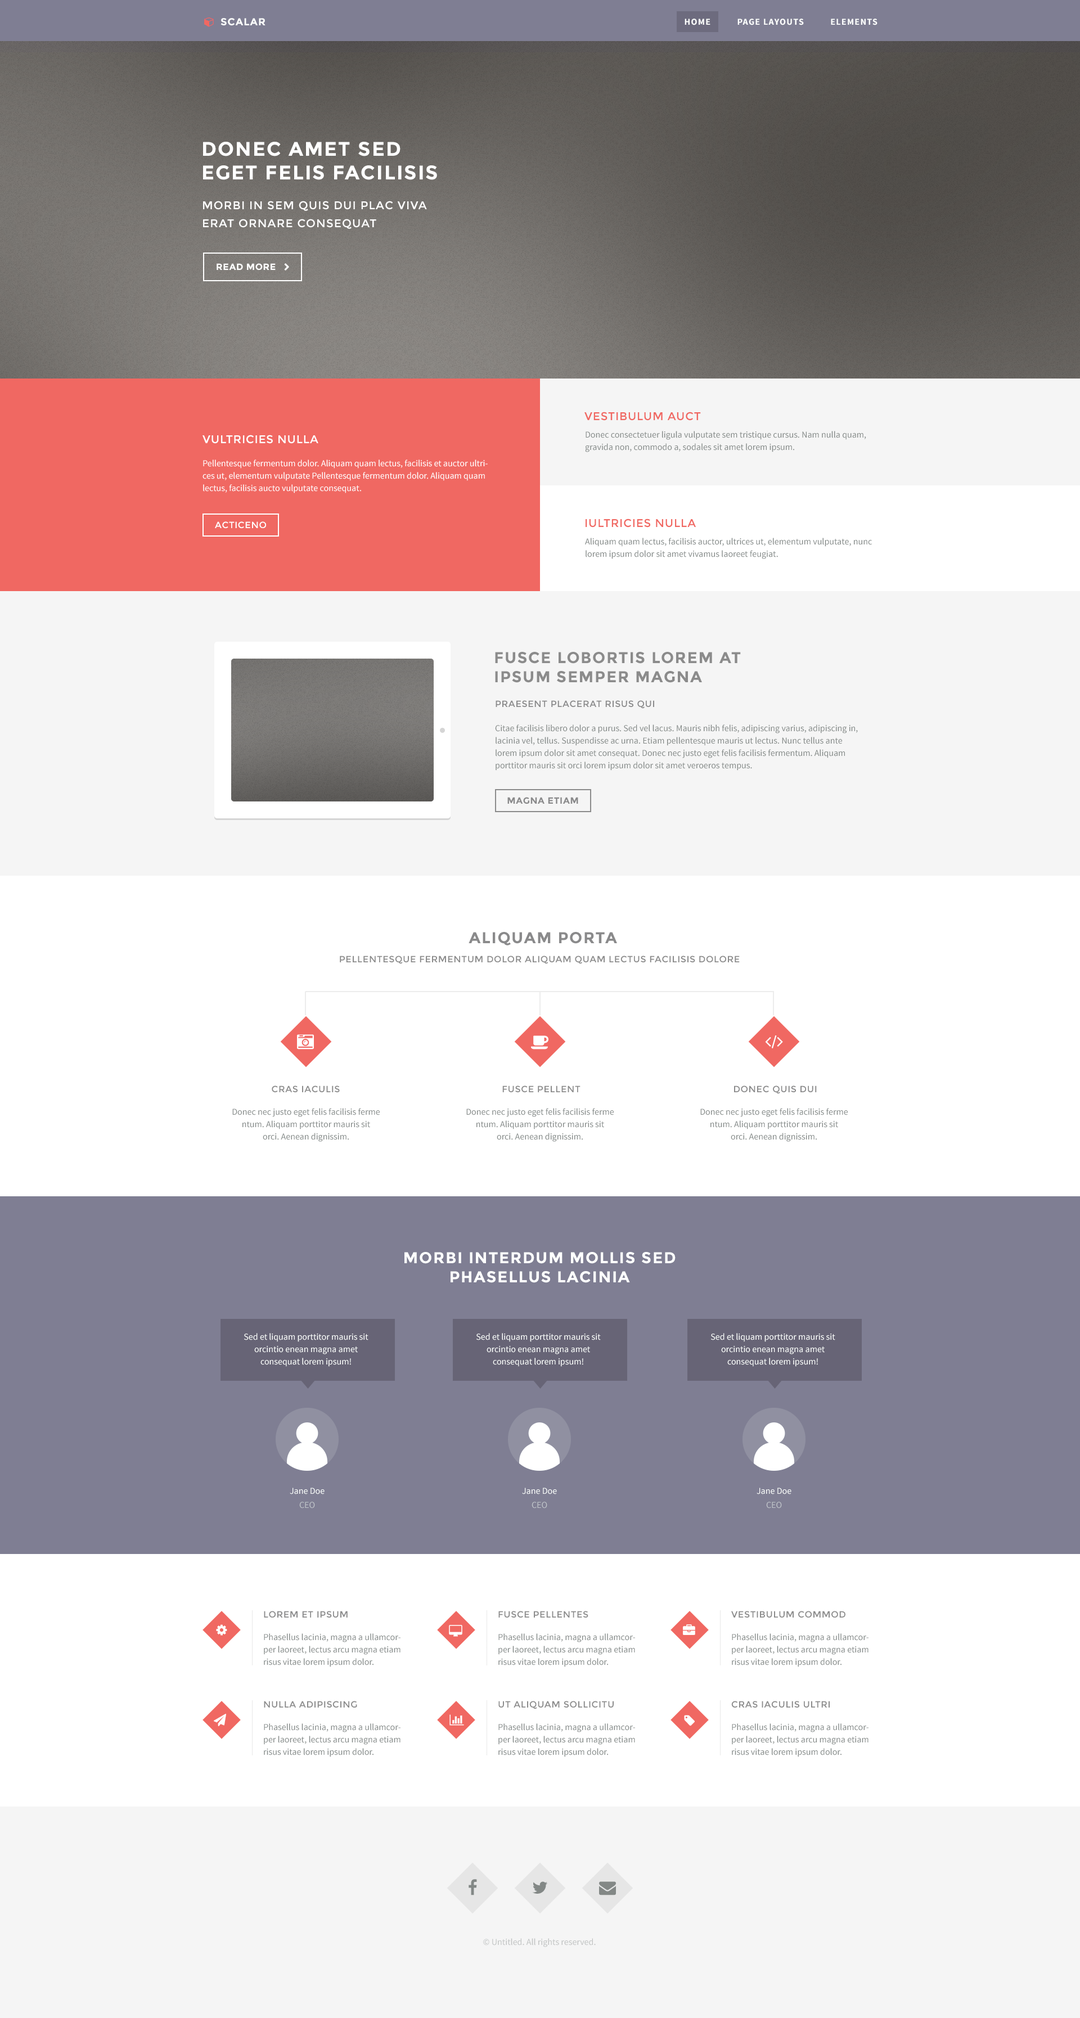
<style>
.page{position:relative;width:1080px;height:2018px;background:#ffffff}
.page>*{position:absolute;margin:0}
.t1{font:10.1px "Montserrat-Bold";letter-spacing:0.06em;color:#ffffff;text-transform:uppercase}
.t2{font:9px "SourceSansPro-Bold";letter-spacing:0.08em;color:#ffffff;text-transform:uppercase}
.t3{font:19.7px "Montserrat-Bold";letter-spacing:0.06em;color:#ffffff;text-transform:uppercase}
.t4{font:11.2px/18px "Montserrat-Regular";letter-spacing:0.06em;color:#ffffff;text-transform:uppercase}
.t5{font:9px "Montserrat-Bold";letter-spacing:0.04em;color:#ffffff;text-transform:uppercase}
.t6{font:11.2px "Montserrat-Regular";letter-spacing:0.04em;color:#f06862;text-transform:uppercase}
.t7{font:11.2px "Montserrat-Regular";letter-spacing:0.04em;color:#ffffff;text-transform:uppercase}
.t8{font:9px/12.4px "SourceSansPro-Regular";color:#7e8288}
.t9{font:9px/12.4px "SourceSansPro-Regular";color:#ffffff}
.t10{font:9px "Montserrat-Regular";letter-spacing:0.04em;color:#ffffff;text-transform:uppercase}
.t11{font:15.8px "Montserrat-Bold";letter-spacing:0.06em;color:#8b8b8b;text-transform:uppercase}
.t12{font:9px "Montserrat-Regular";letter-spacing:0.04em;color:#8b8a8b;text-transform:uppercase}
.t13{font:9px "Montserrat-Bold";letter-spacing:0.04em;color:#8b8a8b;text-transform:uppercase}
.t14{font:15.8px "Montserrat-Bold";letter-spacing:0.06em;color:#8b8a8b;text-transform:uppercase}
.t15{font:9px "Montserrat-Regular";letter-spacing:0.04em;color:#8b8b8b;text-transform:uppercase}
.t16{font:15.8px "Montserrat-Bold";letter-spacing:0.06em;color:#ffffff;text-transform:uppercase}
.t17{font:9px "SourceSansPro-Regular";color:#ffffff}
.t18{font:9px "SourceSansPro-Regular";color:#c3c6cc}
.t19{font:9px "SourceSansPro-Regular";color:#c1c3c3}
</style>
<div class="page">
<p class="t1" style="left:220px;top:18px;width:46px;height:8px">scalar</p>
<p class="t2" style="left:685px;top:19px;width:193px;height:6px">home          page layouts          elements</p>
<p class="t3" style="left:203px;top:142px;width:234px;height:38px">Donec amet sed<br>eget felis facilisis</p>
<p class="t4" style="left:203px;top:201px;width:224px;height:28px">Morbi in sem quis dui plac viva<br>erat ornare consequat</p>
<p class="t5" style="left:217px;top:263px;width:59px;height:7px">read more</p>
<p class="t6" style="left:584px;top:412px;width:117px;height:9px">vestibulum auct</p>
<p class="t7" style="left:202px;top:435px;width:116px;height:9px">vultricies nulla</p>
<p class="t8" style="left:585px;top:431px;width:281px;height:21px">Donec consectetuer ligula vulputate sem tristique cursus. Nam nulla quam, gravida non, commodo a, sodales sit amet lorem ipsum.</p>
<p class="t9" style="left:202px;top:460px;width:286px;height:33px">Pellentesque fermentum dolor. Aliquam quam lectus, facilisis et auctor ultrices ut, elementum vulputate Pellentesque fermentum dolor. Aliquam quam lectus, facilisis aucto vulputate consequat.</p>
<p class="t10" style="left:215px;top:521px;width:51px;height:8px">Acticeno</p>
<p class="t6" style="left:586px;top:519px;width:110px;height:9px">Iultricies nulla</p>
<p class="t8" style="left:585px;top:538px;width:287px;height:21px">Aliquam quam lectus, facilisis auctor, ultrices ut, elementum vulputate, nunc lorem ipsum dolor sit amet vivamus laoreet feugiat.</p>
<p class="t11" style="left:495px;top:652px;width:246px;height:31px">Fusce lobortis lorem at <br>ipsum semper magna</p>
<p class="t12" style="left:496px;top:700px;width:158px;height:9px">Praesent placerat risus qui</p>
<p class="t8" style="left:495px;top:724px;width:363px;height:47px">Citae facilisis libero dolor a purus. Sed vel lacus. Mauris nibh felis, adipiscing varius, adipiscing in, lacinia vel, tellus. Suspendisse ac urna. Etiam pellentesque mauris ut lectus. Nunc tellus ante lorem ipsum dolor sit amet consequat. Donec nec justo eget felis facilisis fermentum. Aliquam porttitor mauris sit orci lorem ipsum dolor sit amet veroeros tempus.</p>
<p class="t13" style="left:507px;top:797px;width:71px;height:7px">magna etiam</p>
<p class="t14" style="left:469px;top:932px;width:148px;height:14px">aliquam porta</p>
<p class="t15" style="left:340px;top:956px;width:400px;height:8px">Pellentesque fermentum dolor aliquam quam lectus facilisis dolore</p>
<p class="t15" style="left:272px;top:1086px;width:68px;height:7px">Cras iaculis</p>
<p class="t15" style="left:502px;top:1086px;width:78px;height:7px">Fusce pellent</p>
<p class="t12" style="left:734px;top:1086px;width:83px;height:8px">Donec quis dui</p>
<p class="t8" style="left:232px;top:1108px;width:148px;height:34px;text-align:center">Donec nec justo eget felis facilisis ferme<br>ntum. Aliquam porttitor mauris sit<br>orci. Aenean dignissim.</p>
<p class="t8" style="left:466px;top:1108px;width:148px;height:34px;text-align:center">Donec nec justo eget felis facilisis ferme<br>ntum. Aliquam porttitor mauris sit<br>orci. Aenean dignissim.</p>
<p class="t8" style="left:700px;top:1108px;width:148px;height:34px;text-align:center">Donec nec justo eget felis facilisis ferme<br>ntum. Aliquam porttitor mauris sit<br>orci. Aenean dignissim.</p>
<p class="t16" style="left:404px;top:1252px;width:272px;height:31px;text-align:center">Morbi interdum mollis sed<br>Phasellus lacinia</p>
<p class="t9" style="left:244px;top:1333px;width:124px;height:34px;text-align:center">Sed et liquam porttitor mauris sit<br>orcintio enean magna amet<br>consequat lorem ipsum!</p>
<p class="t9" style="left:476px;top:1333px;width:125px;height:34px;text-align:center">Sed et liquam porttitor mauris sit<br>orcintio enean magna amet<br>consequat lorem ipsum!</p>
<p class="t9" style="left:711px;top:1333px;width:124px;height:34px;text-align:center">Sed et liquam porttitor mauris sit<br>orcintio enean magna amet<br>consequat lorem ipsum!</p>
<p class="t17" style="left:290px;top:1488px;width:35px;height:7px">Jane Doe</p>
<p class="t17" style="left:522px;top:1488px;width:35px;height:7px">Jane Doe</p>
<p class="t17" style="left:757px;top:1488px;width:34px;height:7px">Jane Doe</p>
<p class="t18" style="left:299px;top:1502px;width:16px;height:7px">CEO</p>
<p class="t18" style="left:532px;top:1502px;width:15px;height:7px">CEO</p>
<p class="t18" style="left:766px;top:1502px;width:16px;height:7px">CEO</p>
<p class="t12" style="left:264px;top:1611px;width:84px;height:7px">lorem et ipsum</p>
<p class="t15" style="left:498px;top:1611px;width:90px;height:7px">Fusce pellentes</p>
<p class="t15" style="left:731px;top:1611px;width:114px;height:7px">Vestibulum commod</p>
<p class="t8" style="left:264px;top:1634px;width:136px;height:33px">Phasellus lacinia, magna a ullamcorper laoreet, lectus arcu magna etiam risus vitae lorem ipsum dolor.</p>
<p class="t8" style="left:498px;top:1634px;width:137px;height:33px">Phasellus lacinia, magna a ullamcorper laoreet, lectus arcu magna etiam risus vitae lorem ipsum dolor.</p>
<p class="t8" style="left:732px;top:1634px;width:136px;height:33px">Phasellus lacinia, magna a ullamcorper laoreet, lectus arcu magna etiam risus vitae lorem ipsum dolor.</p>
<p class="t15" style="left:264px;top:1701px;width:93px;height:7px">nulla adipiscing</p>
<p class="t15" style="left:498px;top:1701px;width:116px;height:8px">Ut aliquam sollicitu</p>
<p class="t15" style="left:731px;top:1701px;width:99px;height:7px">Cras iaculis ultri</p>
<p class="t8" style="left:264px;top:1724px;width:136px;height:33px">Phasellus lacinia, magna a ullamcorper laoreet, lectus arcu magna etiam risus vitae lorem ipsum dolor.</p>
<p class="t8" style="left:498px;top:1724px;width:137px;height:33px">Phasellus lacinia, magna a ullamcorper laoreet, lectus arcu magna etiam risus vitae lorem ipsum dolor.</p>
<p class="t8" style="left:732px;top:1724px;width:136px;height:33px">Phasellus lacinia, magna a ullamcorper laoreet, lectus arcu magna etiam risus vitae lorem ipsum dolor.</p>
<p class="t19" style="left:483px;top:1938px;width:113px;height:9px">© Untitled. All rights reserved.</p>
</div>
